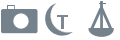
<style>
.page{position:relative;width:120px;height:40px;background:#ffffff}
.page>*{position:absolute;margin:0}
.t1{font:20px "HelveticaNeue-Bold";color:#7c8995}
</style>
<div class="page">
<p class="t1" style="left:56px;top:14px;width:13px;height:15px">T</p>
</div>
